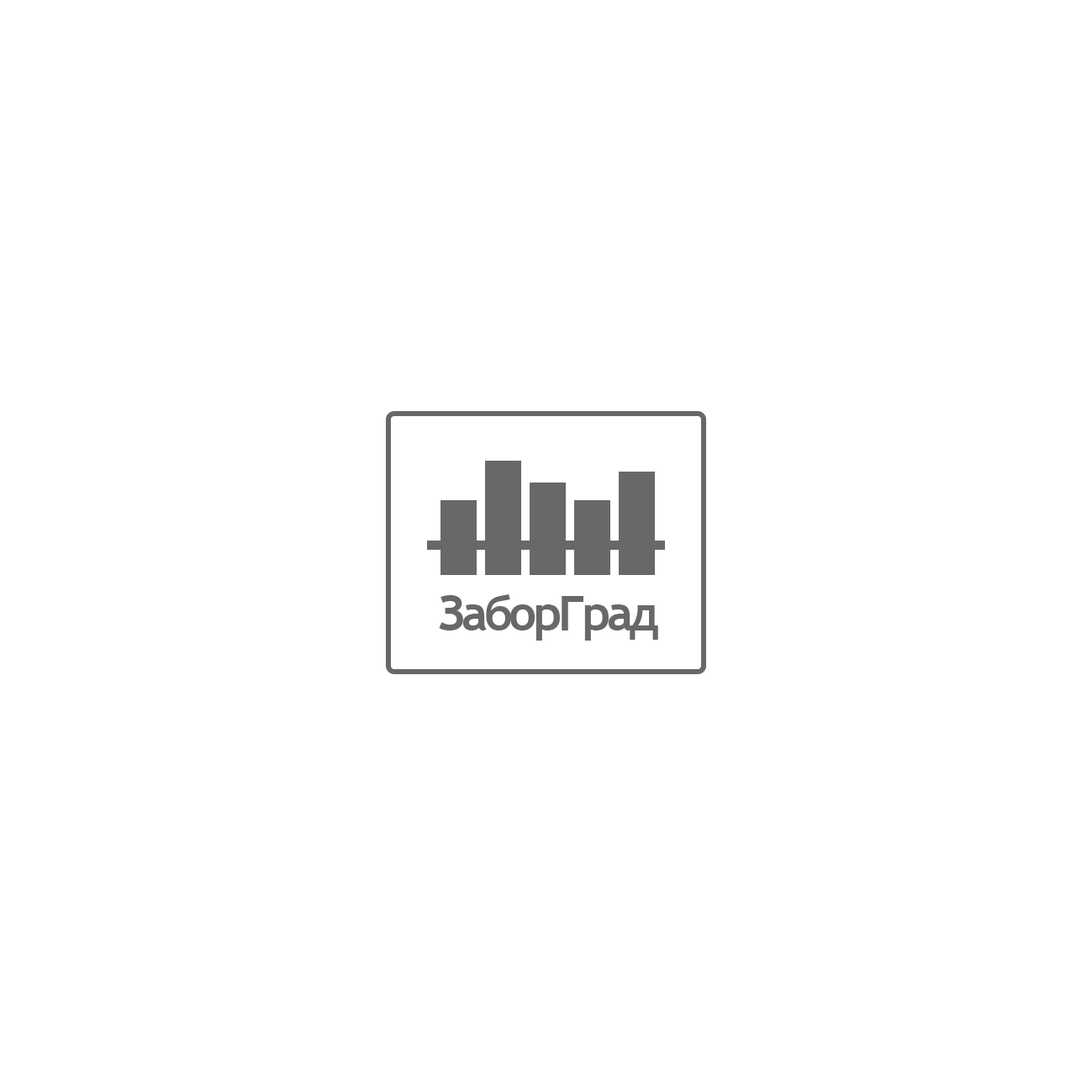
<style>
.page{position:relative;width:1092px;height:1092px;background:#ffffff}
.page>*{position:absolute;margin:0}
.t1{font:49px "TrebuchetMS-Bold";letter-spacing:-0.075em;color:#696868}
</style>
<div class="page">
<p class="t1" style="left:439px;top:594px;width:219px;height:47px">ЗаборГрад</p>
</div>
